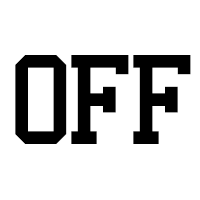
<style>
.page{position:relative;width:200px;height:200px;background:#ffffff}
.page>*{position:absolute;margin:0}
.t1{font:130.1px "College";letter-spacing:-0.06em;color:#000000}
</style>
<div class="page">
<p class="t1" style="left:15px;top:55px;width:176px;height:89px">OFF</p>
</div>
